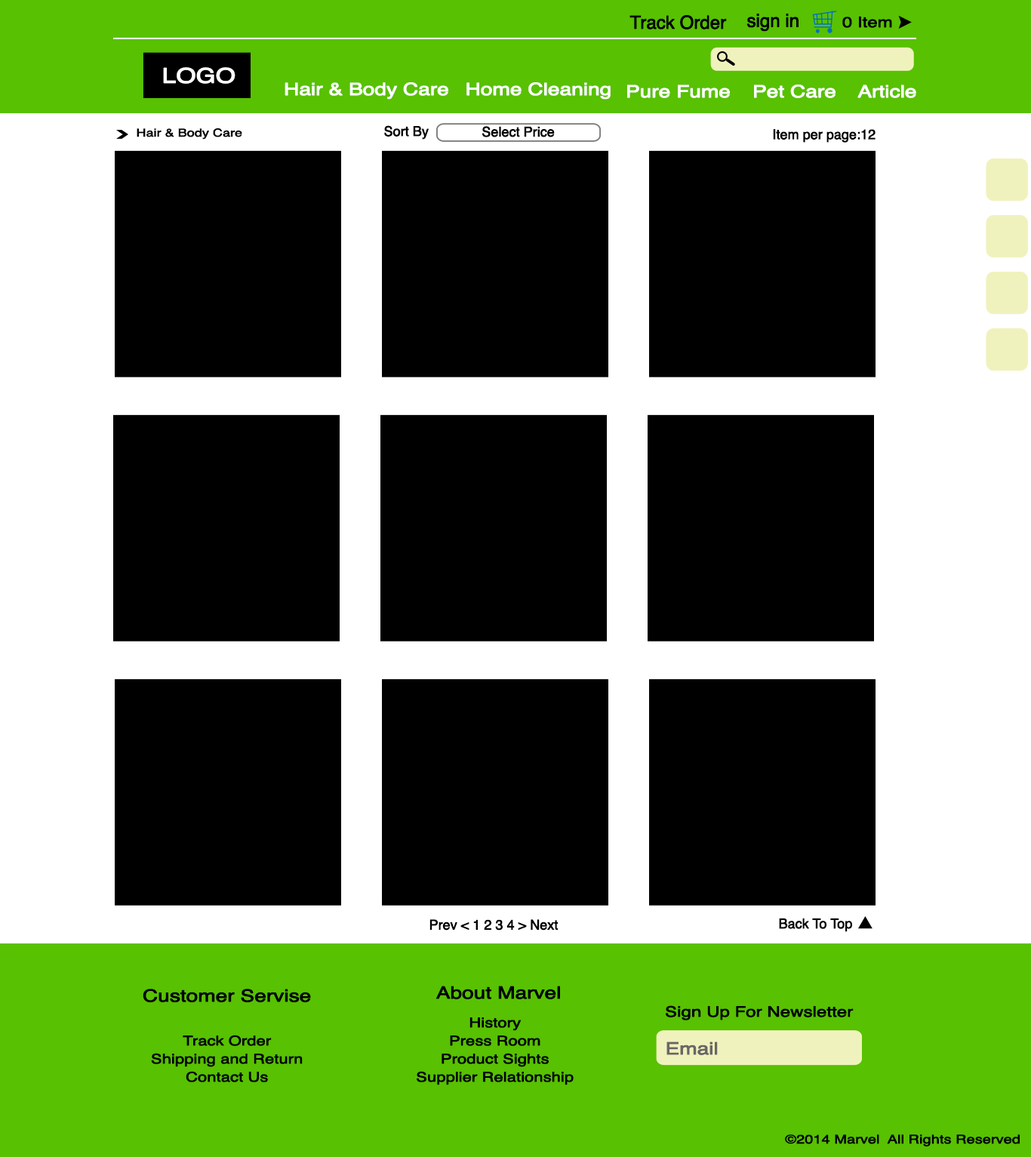
<style>
.page{position:relative;width:1031px;height:1157px;background:#000000}
.page>*{position:absolute;margin:0}
.t1{font:18.1px "Helvetica";letter-spacing:-0.025em;color:#000000;font-weight:bold}
.t2{font:14.5px "Helvetica";letter-spacing:-0.025em;color:#000000;font-weight:bold;scale:1.25 1}
.t3{font:20.3px "Helvetica";letter-spacing:-0.025em;color:#ffffff;font-weight:bold;scale:1.25 1}
.t4{font:16.9px "Helvetica";letter-spacing:-0.025em;color:#ffffff;font-weight:bold;scale:1.25 1}
.t5{font:13.6px "Helvetica";letter-spacing:-0.025em;color:#000000;font-weight:bold}
.t6{font:10.9px "Helvetica";letter-spacing:-0.025em;color:#000000;font-weight:bold;scale:1.25 1}
.t7{font:16.9px "Helvetica";letter-spacing:-0.025em;color:#000000;font-weight:bold;scale:1.25 1}
.t8{font:13.3px/18.1px "Helvetica";letter-spacing:-0.025em;color:#000000;font-weight:bold;scale:1.25 1}
.t9{font:16.9px "Helvetica";letter-spacing:-0.025em;color:#686666;font-weight:bold;scale:1.25 1}
.t10{font:12.1px "Helvetica";letter-spacing:-0.025em;color:#000000;font-weight:bold;scale:1.25 1}
</style>
<div class="page">
<p class="t1" style="left:629px;top:15px;width:98px;height:14px">Track Order</p>
<p class="t1" style="left:746px;top:14px;width:52px;height:18px">sign in</p>
<p class="t2" style="left:842px;top:16px;width:50px;height:12px">0 Item</p>
<p class="t3" style="left:163px;top:67px;width:72px;height:17px">LOGO</p>
<p class="t4" style="left:284px;top:82px;width:164px;height:18px">Hair &amp; Body Care</p>
<p class="t4" style="left:466px;top:82px;width:144px;height:18px">Home Cleaning</p>
<p class="t4" style="left:627px;top:85px;width:103px;height:13px">Pure Fume</p>
<p class="t4" style="left:754px;top:85px;width:81px;height:13px">Pet Care</p>
<p class="t4" style="left:857px;top:85px;width:59px;height:13px">Article</p>
<p class="t5" style="left:384px;top:125px;width:45px;height:15px">Sort By</p>
<p class="t6" style="left:137px;top:128px;width:105px;height:12px">Hair &amp; Body Care</p>
<p class="t5" style="left:482px;top:126px;width:73px;height:11px">Select Price</p>
<p class="t5" style="left:773px;top:129px;width:102px;height:14px">Item per page:12</p>
<p class="t5" style="left:779px;top:918px;width:73px;height:14px">Back To Top</p>
<p class="t5" style="left:429px;top:919px;width:129px;height:11px">Prev &lt; 1 2 3 4 &gt; Next</p>
<p class="t7" style="left:143px;top:989px;width:168px;height:13px">Customer Servise</p>
<p class="t7" style="left:435px;top:986px;width:125px;height:13px">About Marvel</p>
<p class="t2" style="left:666px;top:1005px;width:187px;height:15px">Sign Up For Newsletter</p>
<p class="t8" style="left:417px;top:1017px;width:157px;height:68px;text-align:center">History<br>Press Room<br>Product Sights<br>Supplier Relationship</p>
<p class="t8" style="left:151px;top:1035px;width:152px;height:47px;text-align:center">Track Order<br>Shipping and Return<br>Contact Us</p>
<p class="t9" style="left:666px;top:1041px;width:52px;height:14px">Email</p>
<p class="t10" style="left:785px;top:1134px;width:234px;height:12px">©2014 Marvel  All Rights Reserved</p>
</div>
